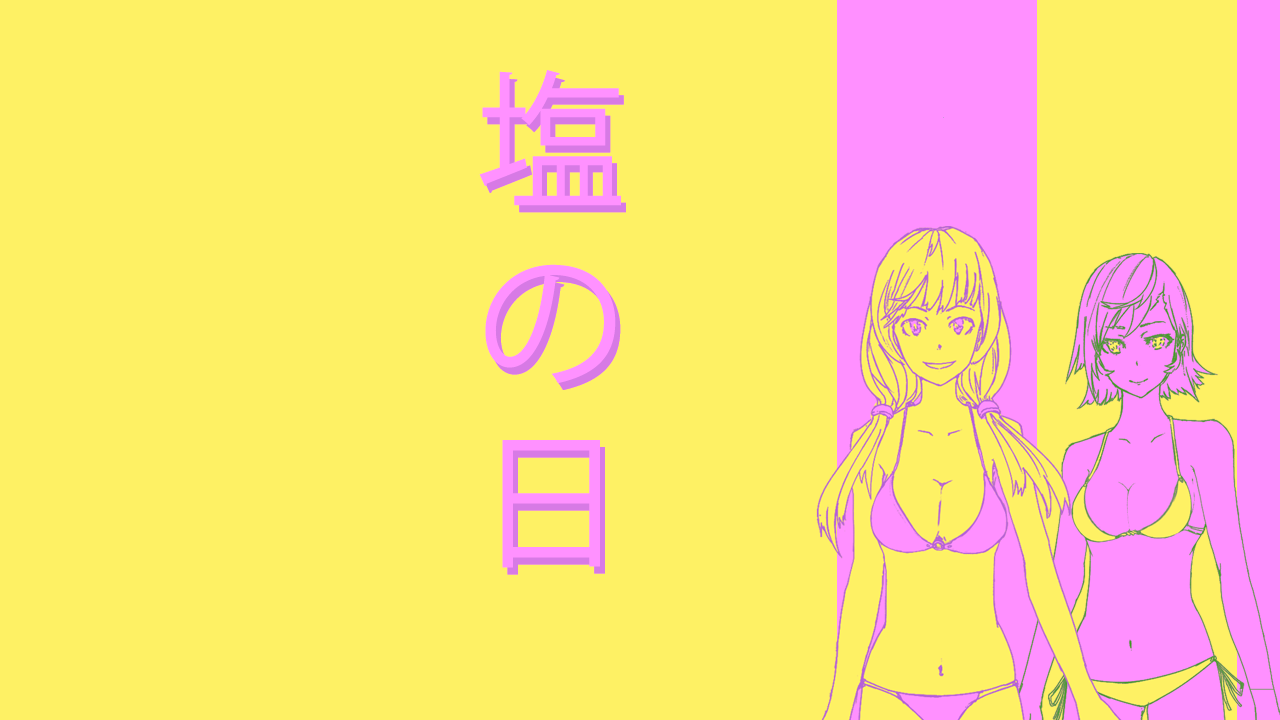
<style>
.page{position:relative;width:1280px;height:720px;background:#fef164}
.page>*{position:absolute;margin:0}
.t1{font:150px "KozGoPr6N-Regular";color:#ff91ff}
</style>
<div class="page">
<p class="t1" style="left:479px;top:70px;width:142px;height:498px;text-align:center">塩<br>の<br>日</p>
</div>
